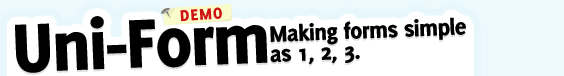
<style>
.page{position:relative;width:564px;height:76px;background:#ffffff}
.page>*{position:absolute;margin:0}
.t1{font:75.5px "Delicious-Heavy";letter-spacing:-0.025em;color:#000000}
.t2{font:17.4px "Delicious-Heavy";letter-spacing:0.05em;color:#cf1313}
.t3{font:24.7px/19.9px "Delicious-Heavy";letter-spacing:-0.025em;color:#000000}
</style>
<div class="page">
<p class="t1" style="left:15px;top:16px;width:253px;height:57px;rotate:-2deg">Uni-Form</p>
<p class="t2" style="left:180px;top:7px;width:42px;height:15px;rotate:-4deg">DEMO</p>
<p class="t3" style="left:270px;top:17px;width:196px;height:48px;rotate:-2deg">Making forms simple<br>as 1, 2, 3.</p>
</div>
